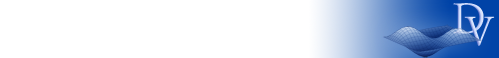
<style>
.page{position:relative;width:499px;height:58px;background:#ffffff}
.page>*{position:absolute;margin:0}
.t1{font:63.9px "DaunPenh";color:#ccdafd}
.t2{font:60.7px "DaunPenh";color:#ccdafd}
</style>
<div class="page">
<p class="t1" style="left:453px;top:3px;width:31px;height:31px">D</p>
<p class="t2" style="left:464px;top:16px;width:31px;height:30px">V</p>
</div>
